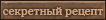
<style>
.page{position:relative;width:106px;height:20px}
.page>*{position:absolute;margin:0}
.t1{font:10.5px "CooperMediumCBT";letter-spacing:0.03em;color:#d2a37e}
</style>
<div class="page">
<p class="t1" style="left:2px;top:7px;width:102px;height:10px">секретный рецепт</p>
</div>
